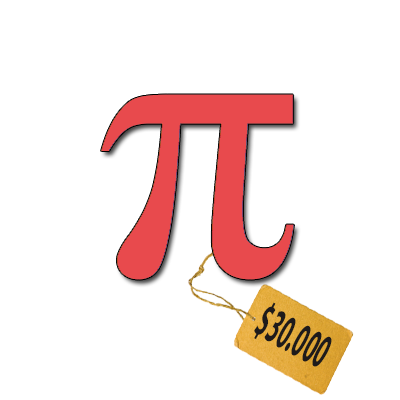
<style>
.page{position:relative;width:400px;height:400px;background:#ffffff}
.page>*{position:absolute;margin:0}
.t1{font:49.7px "MyriadPro-Bold";color:#1e1b1b;scale:0.43 1}
</style>
<div class="page">
<p class="t1" style="left:254px;top:302px;width:78px;height:65px;rotate:29deg">$30.000</p>
</div>
